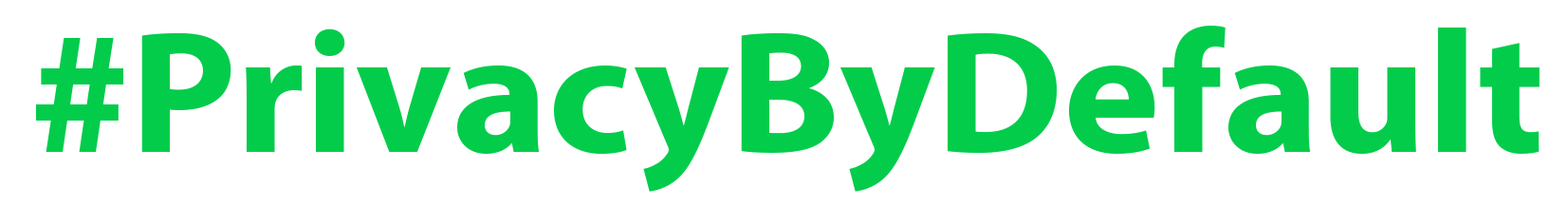
<style>
.page{position:relative;width:1568px;height:206px;background:#ffffff}
.page>*{position:absolute;margin:0}
.t1{font:174.5px "MyriadPro-Bold";color:#03cc4b;scale:1.05 1}
</style>
<div class="page">
<p class="t1" style="left:36px;top:26px;width:1504px;height:166px">#PrivacyByDefault</p>
</div>
